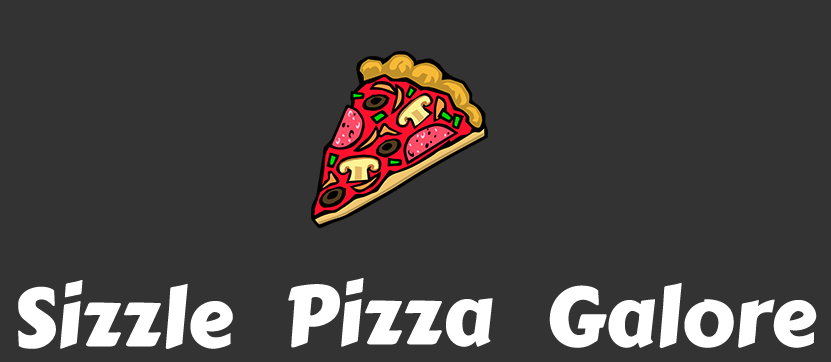
<style>
.page{position:relative;width:831px;height:362px;background:#333333}
.page>*{position:absolute;margin:0}
.t1{font:83.3px "CarterOne";color:#ffffff}
</style>
<div class="page">
<p class="t1" style="left:18px;top:280px;width:215px;height:69px">Sizzle</p>
<p class="t1" style="left:288px;top:278px;width:205px;height:70px">Pizza</p>
<p class="t1" style="left:549px;top:282px;width:268px;height:66px">Galore</p>
</div>
